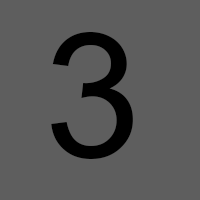
<style>
.page{position:relative;width:200px;height:200px;background:#5e5e5e}
.page>*{position:absolute;margin:0}
.t1{font:174.2px "ArialMT";color:#000000}
</style>
<div class="page">
<p class="t1" style="left:51px;top:32px;width:82px;height:127px">3</p>
</div>
